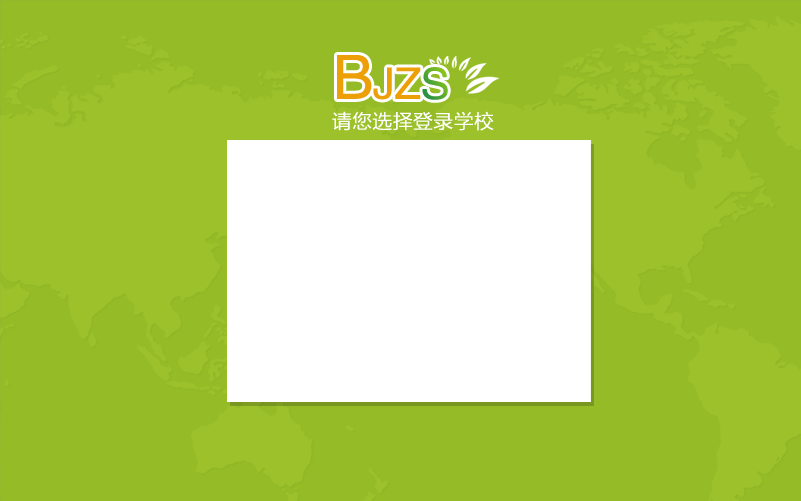
<style>
.page{position:relative;width:801px;height:501px;background:#95bc27}
.page>*{position:absolute;margin:0}
.t1{font:43.7px "FZHTJW--GB1-0";letter-spacing:-0.01em;color:#ed9f07}
.t2{font:61.2px "FZHTJW--GB1-0";letter-spacing:-0.01em;color:#ed9f07}
.t3{font:43.7px "FZHTJW--GB1-0";letter-spacing:-0.01em}
.t4{font:20px "FZLTXHKM";letter-spacing:-0.01em;color:#ffffff;font-weight:bold}
</style>
<div class="page">
<p class="t1" style="left:337px;top:55px;width:84px;height:45px"><span class="t2">B</span>JZ</p>
<p class="t3" style="left:422px;top:67px;width:26px;height:33px">S</p>
<p class="t4" style="left:332px;top:111px;width:162px;height:20px">请您选择登录学校</p>
</div>
